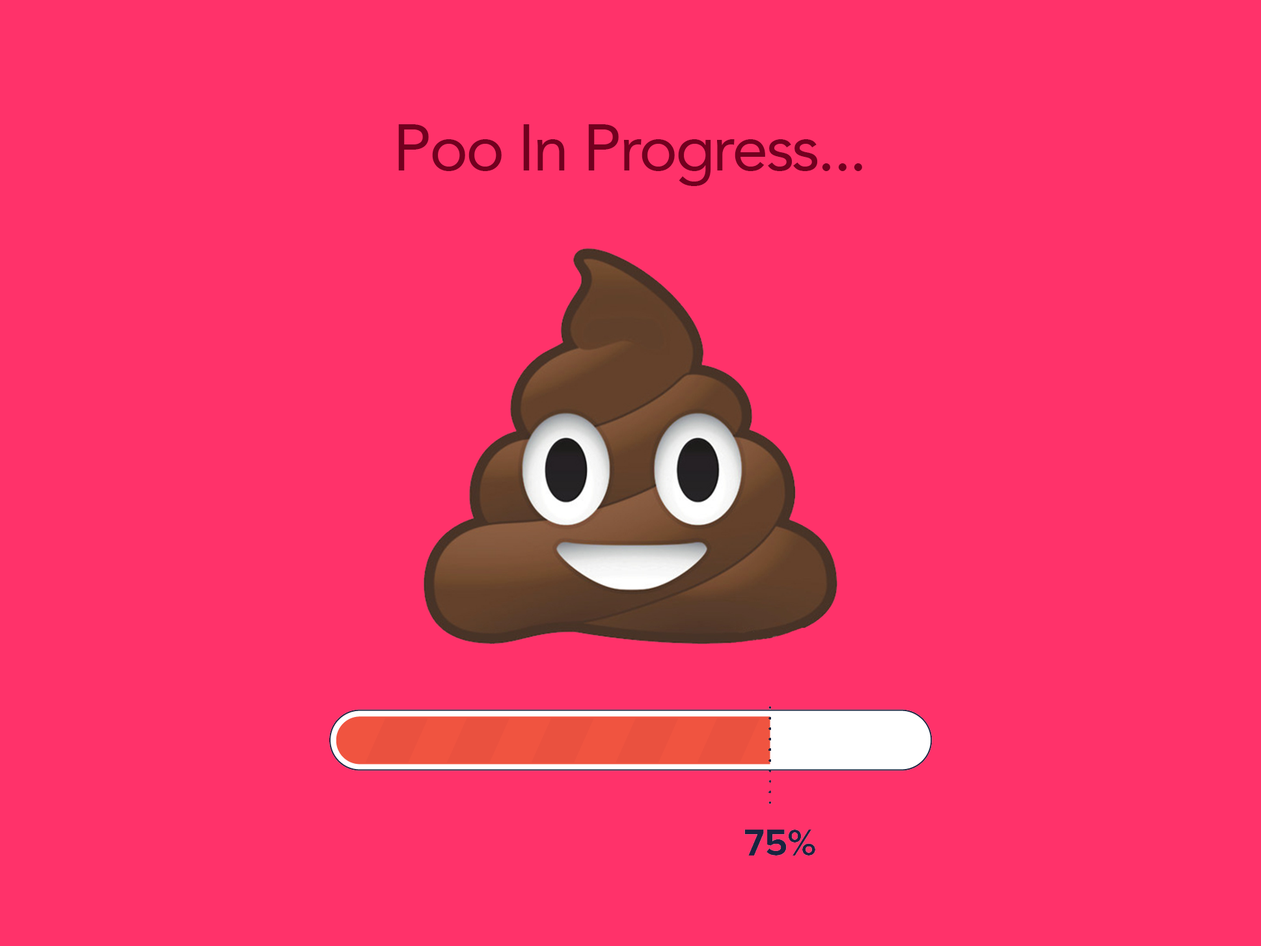
<style>
.page{position:relative;width:1261px;height:946px;background:#ff326a}
.page>*{position:absolute;margin:0}
.t1{font:64.8px "Avenir-Roman";letter-spacing:-0.032em;color:#72001f}
</style>
<div class="page">
<p class="t1" style="left:398px;top:124px;width:464px;height:62px">Poo In Progress...</p>
</div>
